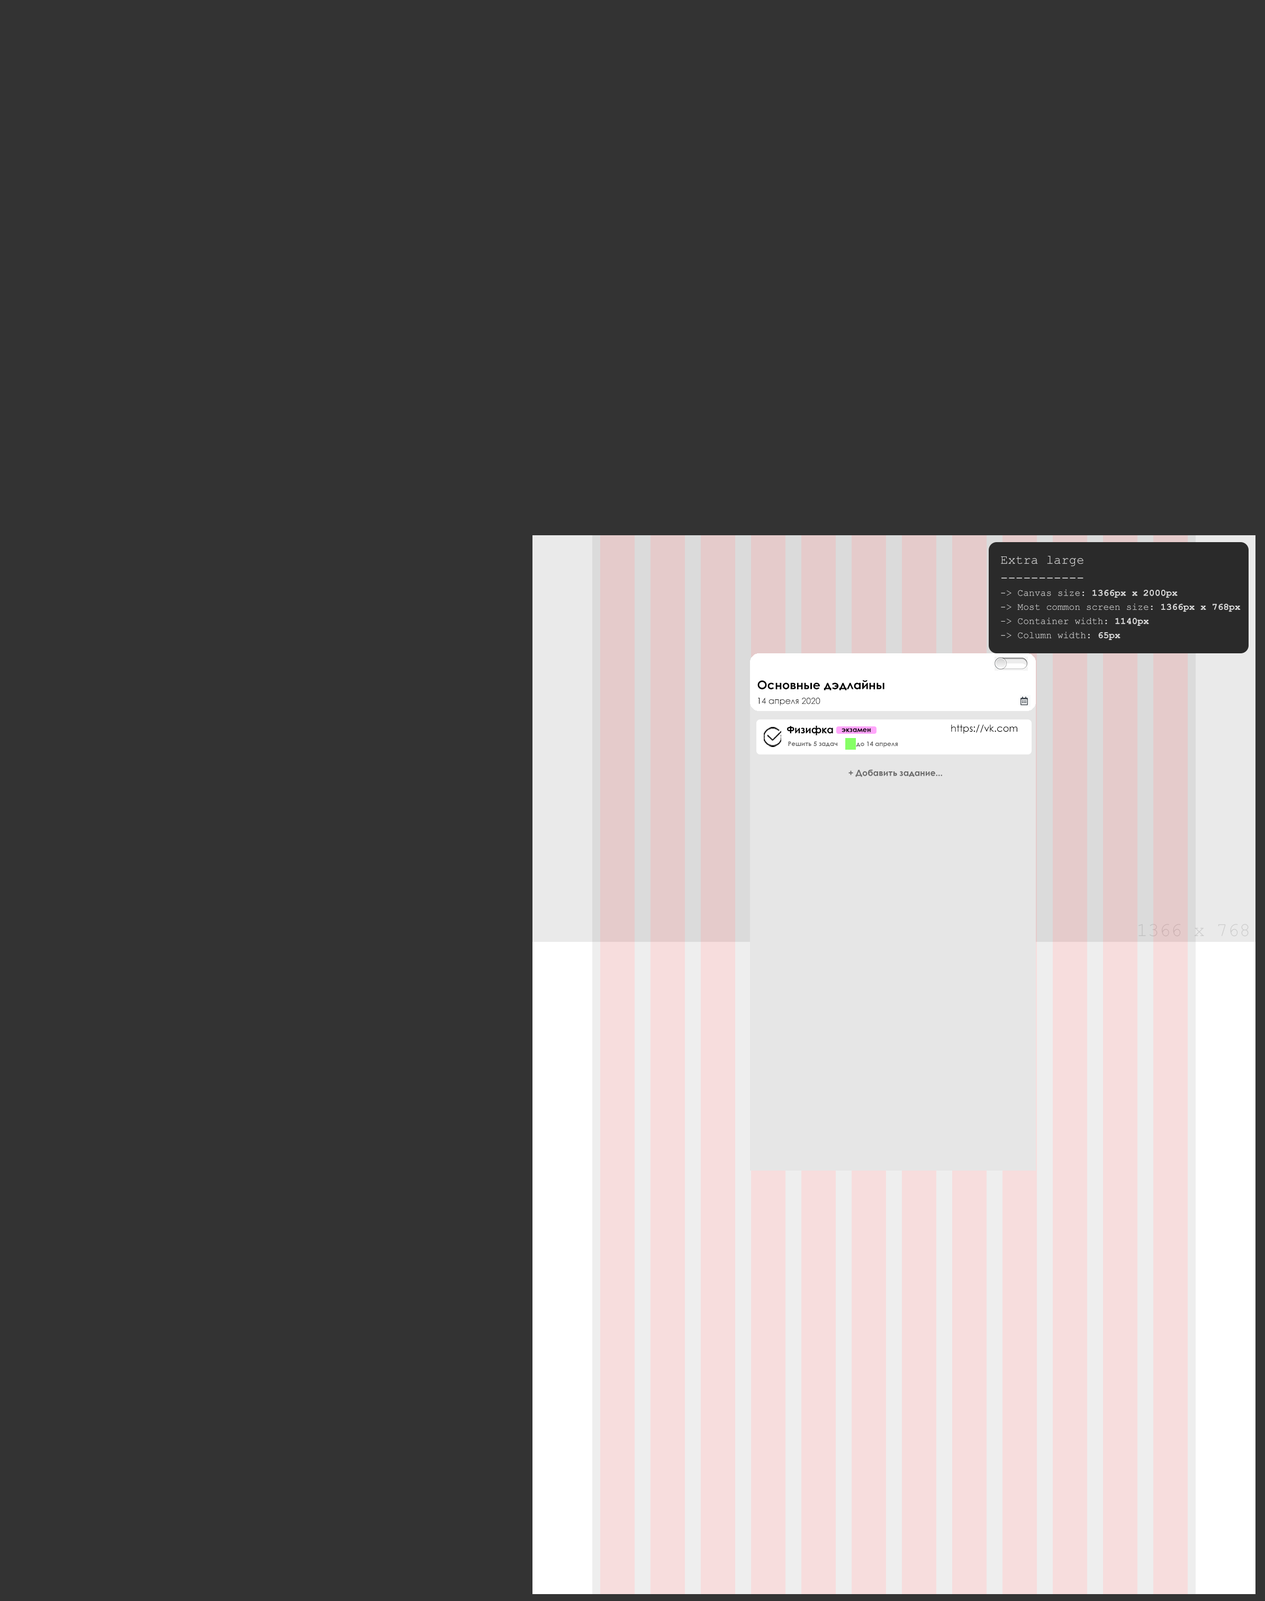
<style>
.page{position:relative;width:1265px;height:1601px;background:#333333}
.page>*{position:absolute;margin:0}
.t1{font:9.5px "CourierNewPSMT";color:#dedede}
.t2{font:12.7px "CourierNewPSMT";color:#dedede}
.t3{font:9.5px "CourierNewPS-BoldMT";color:#dedede}
.t4{font:12px "CenturyGothic-Bold";color:#000000}
.t5{font:8.5px "CenturyGothic";color:#000000}
.t6{font:10.2px "CenturyGothic-Bold";color:#000000}
.t7{font:9.5px "CenturyGothic";color:#000000}
.t8{font:6.9px "CenturyGothic-Bold";color:#000000}
.t9{font:6.4px "CenturyGothic-Bold";color:#666666}
.t10{font:8.5px "CenturyGothic-Bold";color:#6b6b6b}
.t11{font:19.1px "CourierNewPSMT"}
</style>
<div class="page">
<p class="t1" style="left:1001px;top:556px;width:240px;height:84px"><span class="t2">Extra large<br>-----------</span><br>-&gt; Canvas size: <span class="t3">1366px x 2000px<br></span>-&gt; Most common screen size:<span class="t3"> 1366px x 768px<br></span>-&gt; Container width: <span class="t3">1140px</span><br>-&gt; Column width: <span class="t3">65px</span></p>
<p class="t4" style="left:758px;top:680px;width:127px;height:10px">Основные дэдлайны</p>
<p class="t5" style="left:758px;top:697px;width:63px;height:9px">14 апреля 2020</p>
<p class="t6" style="left:787px;top:725px;width:46px;height:10px">Физифка</p>
<p class="t7" style="left:951px;top:724px;width:67px;height:10px">https://vk.com</p>
<p class="t8" style="left:842px;top:728px;width:29px;height:4px">экзамен</p>
<p class="t9" style="left:788px;top:741px;width:50px;height:5px">Решить 5 задач</p>
<p class="t9" style="left:856px;top:741px;width:42px;height:7px">до 14 апреля</p>
<p class="t10" style="left:849px;top:769px;width:93px;height:8px">+ Добавить задание...</p>
<p class="t11" style="left:1139px;top:924px;width:110px;height:13px">1366 x 768</p>
</div>
